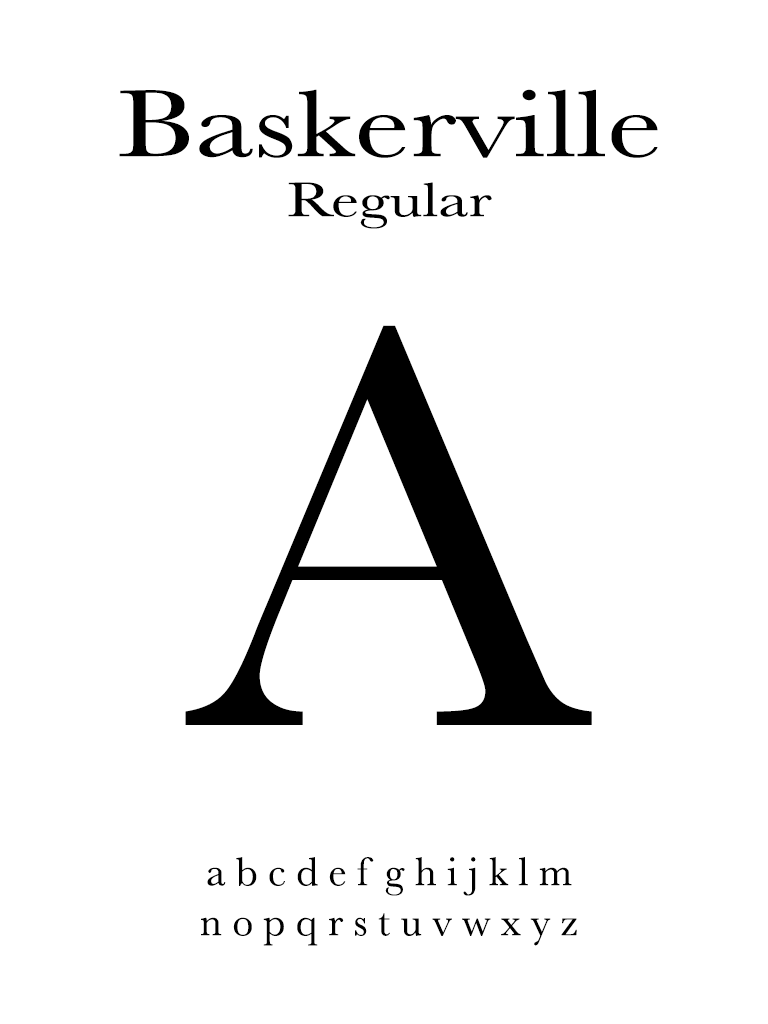
<style>
.page{position:relative;width:768px;height:1024px;background:#ffffff}
.page>*{position:absolute;margin:0}
.t1{font:98.6px "Baskerville";color:#000000;scale:1.29 1}
.t2{font:50px "Baskerville";color:#000000;scale:1.29 1}
.t3{font:594.5px "Baskerville";color:#000000}
.t4{font:41.7px "Baskerville";color:#000000}
</style>
<div class="page">
<p class="t1" style="left:119px;top:89px;width:539px;height:140px;text-align:center">Baskerville<br><span class="t2">Regular</span></p>
<p class="t3" style="left:185px;top:325px;width:407px;height:400px">A</p>
<p class="t4" style="left:201px;top:857px;width:376px;height:89px;text-align:center">a b c d e f g h i j k l m<br>n o p q r s t u v w x y z</p>
</div>
